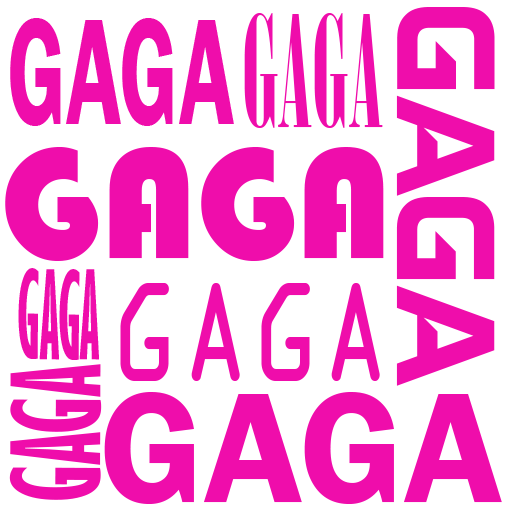
<style>
.page{position:relative;width:512px;height:512px;background:#ffffff}
.page>*{position:absolute;margin:0}
.t1{font:154.3px "BodoniMTPosterCompressed";color:#ef0dab;scale:0.73 1}
.t2{font:162.3px "GayatriRegular";color:#ef0dab}
.t3{font:156.3px "FranklinGothic-Demi";color:#ef0dab;scale:0.58 1}
.t4{font:162.3px "Bauhaus93";color:#ef0dab}
.t5{font:111.9px "GillSansMT-ExtraCondensedBold";color:#ef0dab;scale:0.6 1}
.t6{font:151.3px "OCRAExtended";color:#ef0dab;scale:0.77 1}
.t7{font:111.9px "GillSansMT-ExtraCondensedBold";color:#ef0dab}
.t8{font:162.3px "FranklinGothic-Demi";color:#ef0dab}
</style>
<div class="page">
<p class="t1" style="left:244px;top:13px;width:139px;height:115px">GAGA</p>
<p class="t2" style="left:396px;top:7px;width:99px;height:379px;rotate:90deg">GAGA</p>
<p class="t3" style="left:10px;top:18px;width:224px;height:108px">GAGA</p>
<p class="t4" style="left:5px;top:147px;width:379px;height:114px">GAGA</p>
<p class="t5" style="left:18px;top:268px;width:81px;height:92px;rotate:1deg">GAGA</p>
<p class="t6" style="left:120px;top:283px;width:260px;height:98px">GAGA</p>
<p class="t7" style="left:9px;top:364px;width:93px;height:136px;rotate:-90deg">GAGA</p>
<p class="t8" style="left:104px;top:392px;width:398px;height:112px">GAGA</p>
</div>
